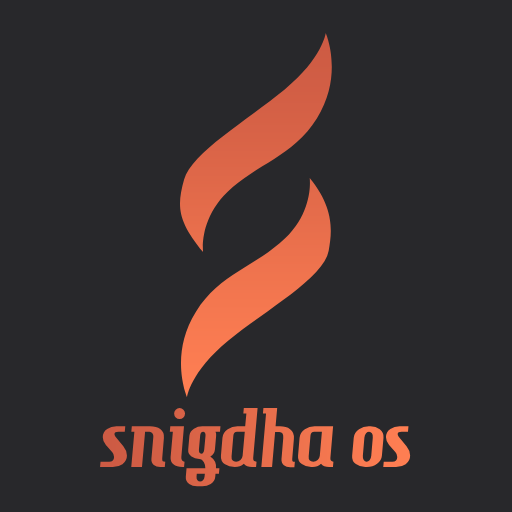
<style>
.page{position:relative;width:512px;height:512px;background:#28282b}
.page>*{position:absolute;margin:0}
.t1{font:80px "HamburgerHeaven";color:#e46b4a}
</style>
<div class="page">
<p class="t1" style="left:100px;top:408px;width:311px;height:79px">snigdha os</p>
</div>
